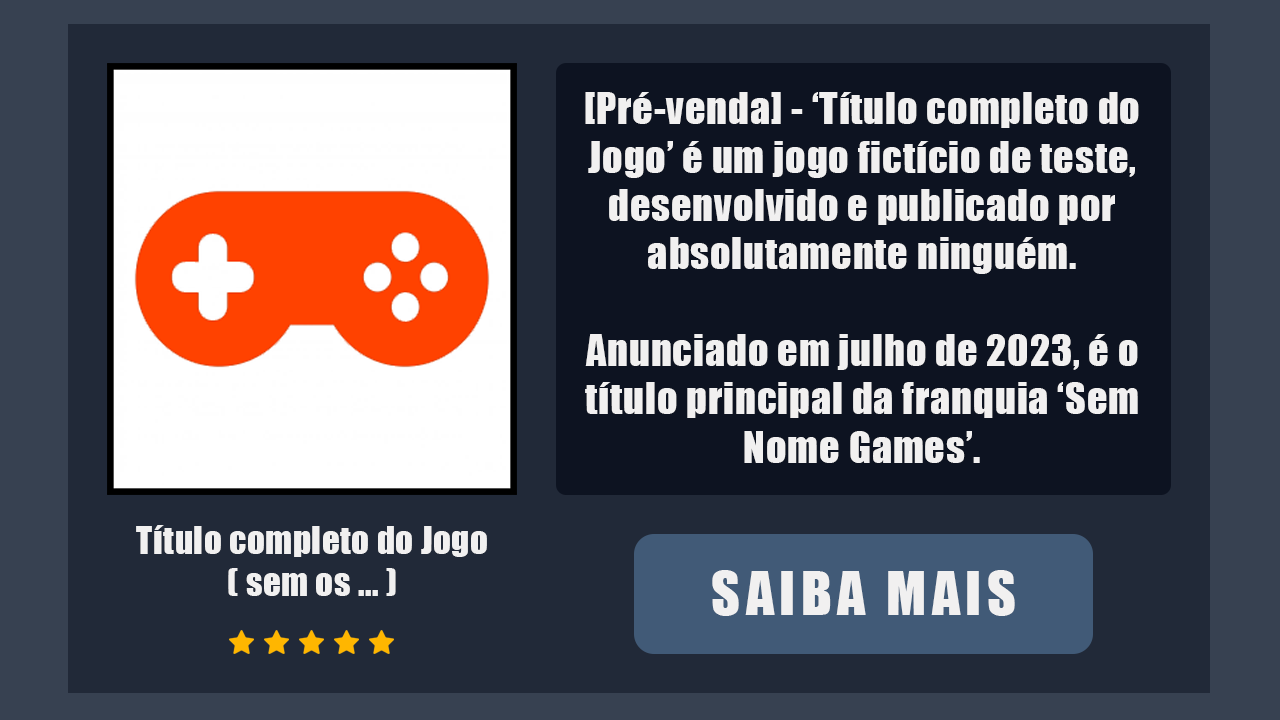
<style>
.page{position:relative;width:1280px;height:720px;background:#212938}
.page>*{position:absolute;margin:0}
.t1{font:40.3px "Impact";letter-spacing:0.02em;color:#f1f0f0}
.t2{font:34.7px "Impact";letter-spacing:0.02em;color:#f1f0f0}
.t3{font:55.6px "Impact";letter-spacing:0.1em;color:#f1f0f0}
</style>
<div class="page">
<p class="t1" style="left:585px;top:92px;width:554px;height:371px;text-align:center">[Pré-venda] - ‘Título completo do Jogo’ é um jogo fictício de teste, desenvolvido e publicado por absolutamente ninguém. <br><br>Anunciado em julho de 2023, é o título principal da franquia ‘Sem Nome Games’.</p>
<p class="t2" style="left:136px;top:525px;width:351px;height:71px;text-align:center">Título completo do Jogo<br>( sem os ... )</p>
<p class="t3" style="left:712px;top:570px;width:303px;height:46px">SAIBA MAIS</p>
</div>
